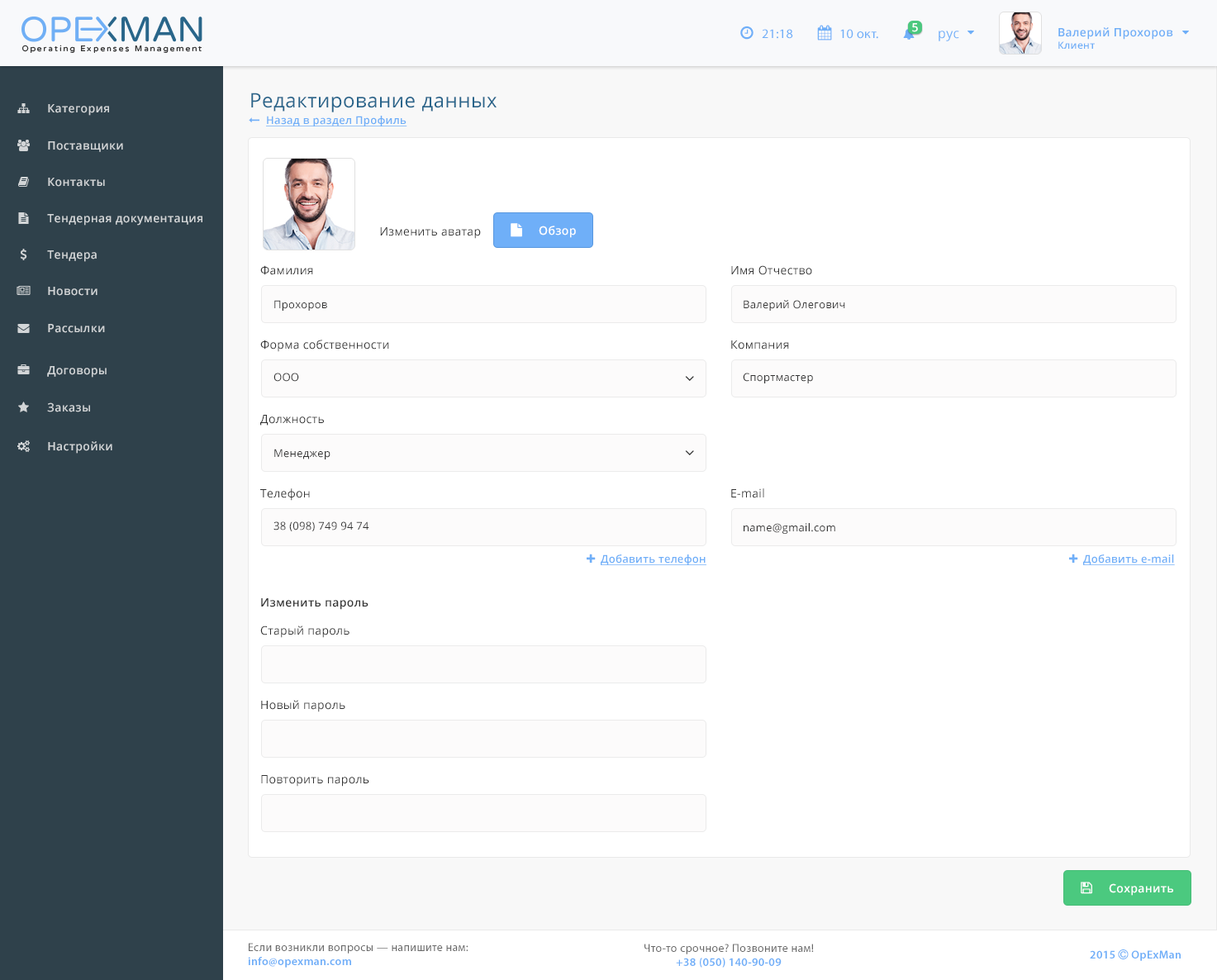
<style>
.page{position:relative;width:1217px;height:980px;background:#ffffff}
.page>*{position:absolute;margin:0}
.t1{font:13.2px "MyriadPro-Regular";letter-spacing:0.025em;color:#6faff8}
.t2{font:11.5px "OpenSans-Semibold";letter-spacing:0.025em;color:#ffffff}
.t3{font:11.5px "OpenSans-Semibold";letter-spacing:0.025em;color:#6eaef7}
.t4{font:9.9px "OpenSans-Semibold";letter-spacing:0.025em;color:#6eaef7}
.t5{font:13.2px "OpenSans";letter-spacing:0.025em;color:#6eaff8}
.t6{font:19.8px "OpenSans";letter-spacing:0.025em;color:#29658b}
.t7{font:11.5px "OpenSans-Semibold";letter-spacing:0.025em;color:#d2d5d7}
.t8{font:10.7px "OpenSans-Semibold";letter-spacing:0.025em;color:#6faff8;text-decoration:underline}
.t9{font:11.5px "OpenSans";letter-spacing:0.025em;color:#333333}
.t10{font:10.7px "OpenSans";letter-spacing:0.025em;color:#333333}
.t11{font:11.5px "OpenSans-Semibold";letter-spacing:0.025em;color:#333333}
.t12{font:11.5px "MyriadPro-Regular";letter-spacing:0.025em;color:#696969}
.t13{font:11.5px "MyriadPro-Semibold";letter-spacing:0.025em;color:#6eaef8}
</style>
<div class="page">
<p class="t1" style="left:762px;top:29px;width:31px;height:10px">21:18</p>
<p class="t1" style="left:840px;top:29px;width:38px;height:10px">10 окт.</p>
<p class="t2" style="left:912px;top:23px;width:6px;height:9px">5</p>
<p class="t3" style="left:1058px;top:27px;width:115px;height:22px">Валерий Прохоров<br><span class="t4">Клиент</span></p>
<p class="t5" style="left:939px;top:31px;width:20px;height:10px">рус</p>
<p class="t6" style="left:251px;top:93px;width:246px;height:19px">Редактирование данных</p>
<p class="t7" style="left:48px;top:104px;width:61px;height:12px">Категория</p>
<p class="t8" style="left:266px;top:116px;width:141px;height:10px">Назад в раздел Профиль</p>
<p class="t7" style="left:48px;top:141px;width:75px;height:11px">Поставщики</p>
<p class="t7" style="left:48px;top:178px;width:57px;height:9px">Контакты</p>
<p class="t7" style="left:47px;top:214px;width:155px;height:12px">Тендерная документация</p>
<p class="t9" style="left:380px;top:227px;width:101px;height:12px">Изменить аватар</p>
<p class="t2" style="left:539px;top:226px;width:37px;height:12px">Обзор</p>
<p class="t7" style="left:47px;top:250px;width:50px;height:12px">Тендера</p>
<p class="t9" style="left:260px;top:265px;width:53px;height:10px">Фамилия</p>
<p class="t9" style="left:731px;top:265px;width:81px;height:10px">Имя Отчество</p>
<p class="t7" style="left:48px;top:287px;width:49px;height:9px">Новости</p>
<p class="t10" style="left:274px;top:300px;width:53px;height:11px">Прохоров</p>
<p class="t10" style="left:744px;top:300px;width:101px;height:11px">Валерий Олегович</p>
<p class="t7" style="left:48px;top:324px;width:57px;height:9px">Рассылки</p>
<p class="t9" style="left:260px;top:340px;width:129px;height:12px">Форма собственности</p>
<p class="t9" style="left:731px;top:340px;width:58px;height:9px">Компания</p>
<p class="t7" style="left:47px;top:366px;width:60px;height:12px">Договоры</p>
<p class="t10" style="left:273px;top:373px;width:26px;height:9px">ООО</p>
<p class="t10" style="left:743px;top:373px;width:70px;height:10px">Спортмастер</p>
<p class="t7" style="left:47px;top:402px;width:43px;height:10px">Заказы</p>
<p class="t9" style="left:260px;top:415px;width:64px;height:10px">Должность</p>
<p class="t7" style="left:48px;top:441px;width:64px;height:13px">Настройки</p>
<p class="t10" style="left:274px;top:449px;width:56px;height:10px">Менеджер</p>
<p class="t9" style="left:260px;top:488px;width:50px;height:13px">Телефон</p>
<p class="t9" style="left:731px;top:488px;width:33px;height:10px">E-mail</p>
<p class="t10" style="left:273px;top:521px;width:96px;height:10px">38 (098) 749 94 74</p>
<p class="t10" style="left:744px;top:523px;width:91px;height:11px">name@gmail.com</p>
<p class="t8" style="left:601px;top:554px;width:105px;height:11px">Добавить телефон</p>
<p class="t8" style="left:1083px;top:554px;width:92px;height:11px">Добавить e-mail</p>
<p class="t11" style="left:261px;top:598px;width:107px;height:12px">Изменить пароль</p>
<p class="t9" style="left:260px;top:625px;width:89px;height:13px">Старый пароль</p>
<p class="t9" style="left:261px;top:700px;width:84px;height:12px">Новый пароль</p>
<p class="t9" style="left:261px;top:775px;width:108px;height:12px">Повторить пароль</p>
<p class="t2" style="left:1109px;top:883px;width:64px;height:13px">Сохранить</p>
<p class="t12" style="left:248px;top:943px;width:220px;height:24px">Если возникли вопросы — напишите нам:<br><span class="t13">info@opexman.com</span></p>
<p class="t12" style="left:644px;top:943px;width:170px;height:24px;text-align:center">Что-то срочное? Позвоните нам!<br><span class="t13">+38 (050) 140-90-09</span></p>
</div>
